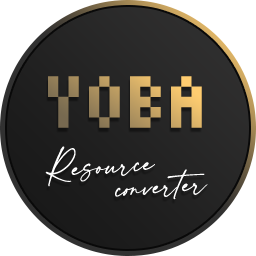
<style>
.page{position:relative;width:256px;height:256px;background:#ffffff}
.page>*{position:absolute;margin:0}
.t1{font:82px "Vaticanus"}
.t2{font:25px/24px "modernline-bold";color:#ffffff}
</style>
<div class="page">
<p class="t1" style="left:48px;top:76px;width:154px;height:52px">YOBA</p>
<p class="t2" style="left:45px;top:146px;width:163px;height:54px;text-align:center;rotate:-4deg">Resource<br>             converter</p>
</div>
